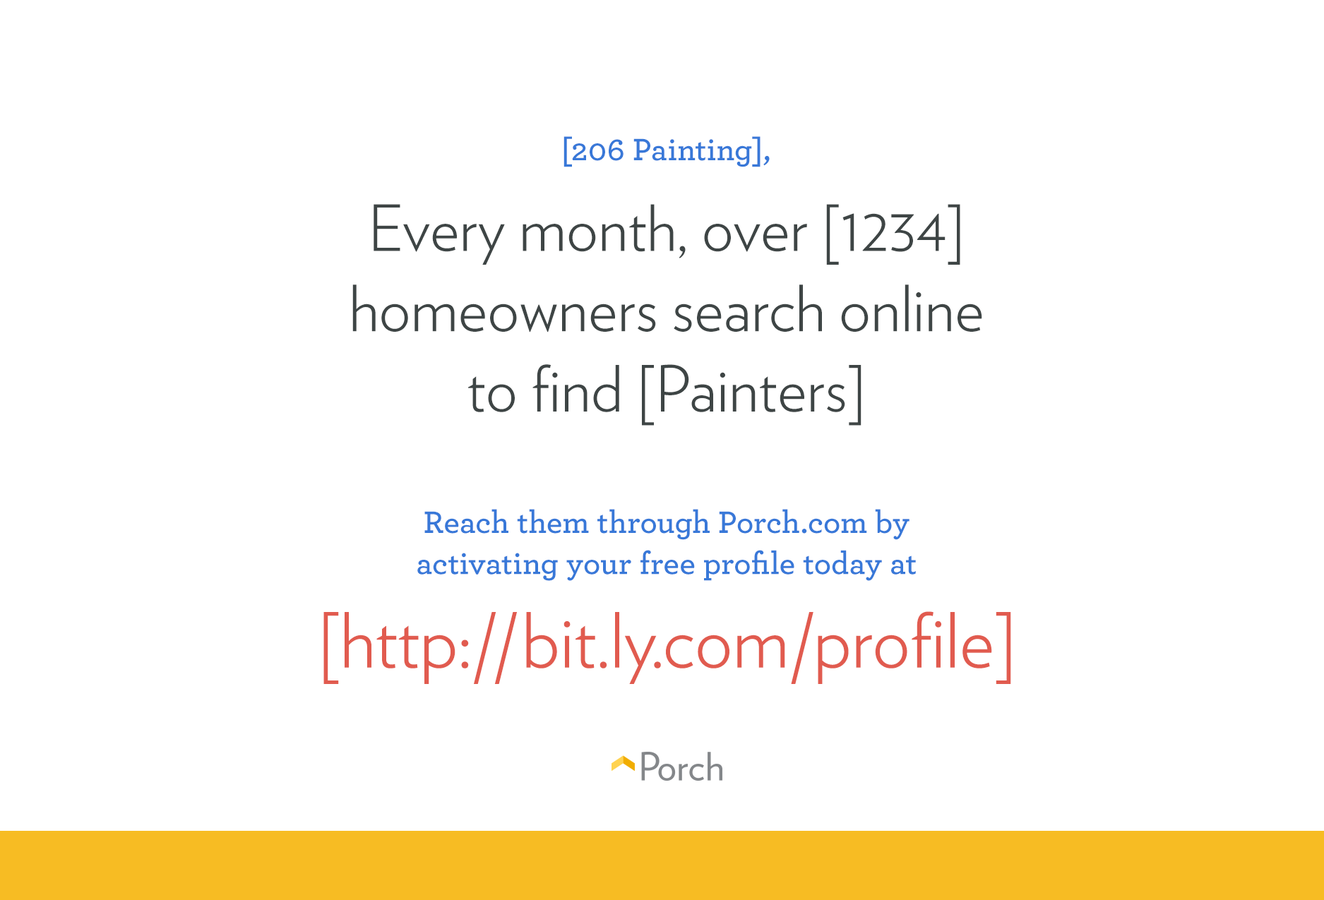
<style>
.page{position:relative;width:1324px;height:900px;background:#ffffff}
.page>*{position:absolute;margin:0}
.t1{font:32.4px "Archer-Semibold";letter-spacing:0.01em;color:#3878d8}
.t2{font:63.6px/80.4px "Verlag-Light";color:#3e4545}
.t3{font:32.4px/41.2px "Archer-Semibold";letter-spacing:0.01em;color:#3878d8}
.t4{font:75.6px "Verlag-Light";color:#e15b4f}
</style>
<div class="page">
<p class="t1" style="left:564px;top:136px;width:206px;height:31px">[206 Painting],</p>
<p class="t2" style="left:352px;top:204px;width:630px;height:222px;text-align:center">Every month, over [1234] homeowners search online to find [Painters]</p>
<p class="t3" style="left:417px;top:509px;width:499px;height:72px;text-align:center">Reach them through Porch.com by<br>activating your free profile today at</p>
<p class="t4" style="left:323px;top:612px;width:688px;height:72px">[http://bit.ly.com/profile]</p>
</div>
